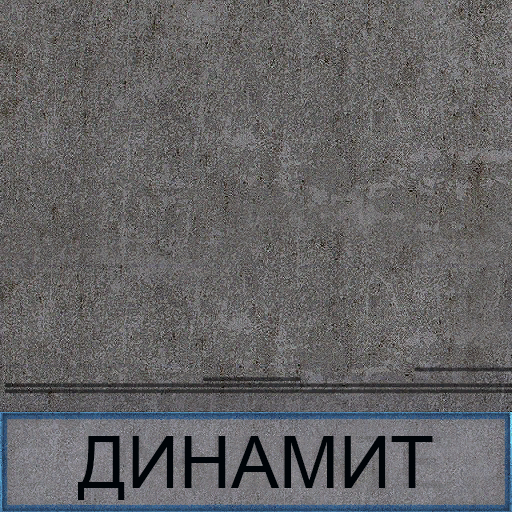
<style>
.page{position:relative;width:512px;height:512px}
.page>*{position:absolute;margin:0}
.t1{font:72px "ArialMT";color:#000408}
</style>
<div class="page">
<p class="t1" style="left:78px;top:436px;width:355px;height:64px">ДИНАМИТ</p>
</div>
